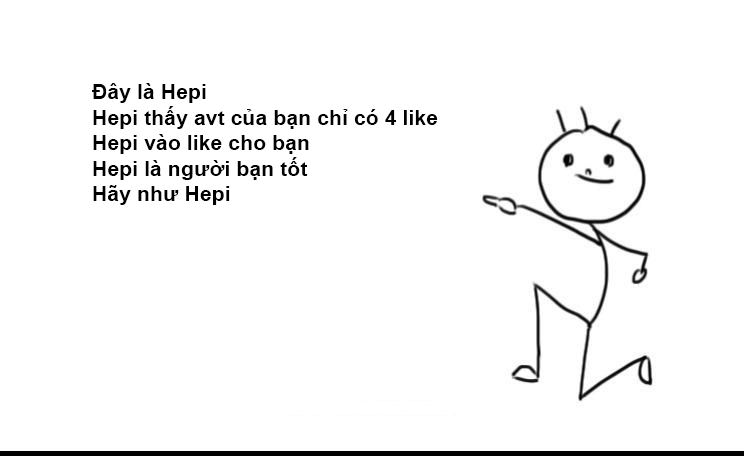
<style>
.page{position:relative;width:744px;height:456px;background:#ffffff}
.page>*{position:absolute;margin:0}
.t1{font:21.3px "Arial-BoldMT";color:#000000}
</style>
<div class="page">
<p class="t1" style="left:92px;top:83px;width:346px;height:122px">Đây là Hepi<br>Hepi thấy avt của bạn chỉ có 4 like<br>Hepi vào like cho bạn<br>Hepi là người bạn tốt<br>Hãy như Hepi</p>
</div>
